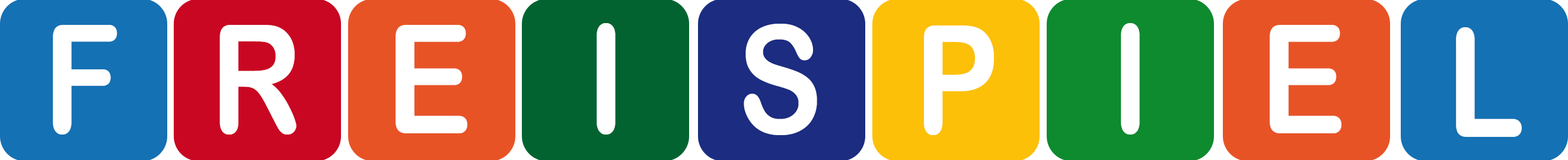
<style>
.page{position:relative;width:1568px;height:160px}
.page>*{position:absolute;margin:0}
.t1{font:150.8px "ArialRoundedMTBold";color:#ffffff;scale:0.85 1}
.t2{font:151.7px "ArialRoundedMTBold";color:#ffffff;scale:0.86 1}
</style>
<div class="page">
<p class="t1" style="left:53px;top:25px;width:64px;height:110px">F</p>
<p class="t1" style="left:219px;top:25px;width:78px;height:110px">R</p>
<p class="t2" style="left:396px;top:25px;width:71px;height:108px">E</p>
<p class="t1" style="left:597px;top:23px;width:19px;height:112px">I</p>
<p class="t1" style="left:744px;top:24px;width:73px;height:111px">S</p>
<p class="t1" style="left:923px;top:26px;width:71px;height:109px">P</p>
<p class="t1" style="left:1121px;top:23px;width:19px;height:112px">I</p>
<p class="t2" style="left:1270px;top:25px;width:71px;height:108px">E</p>
<p class="t1" style="left:1456px;top:27px;width:66px;height:110px">L</p>
</div>
